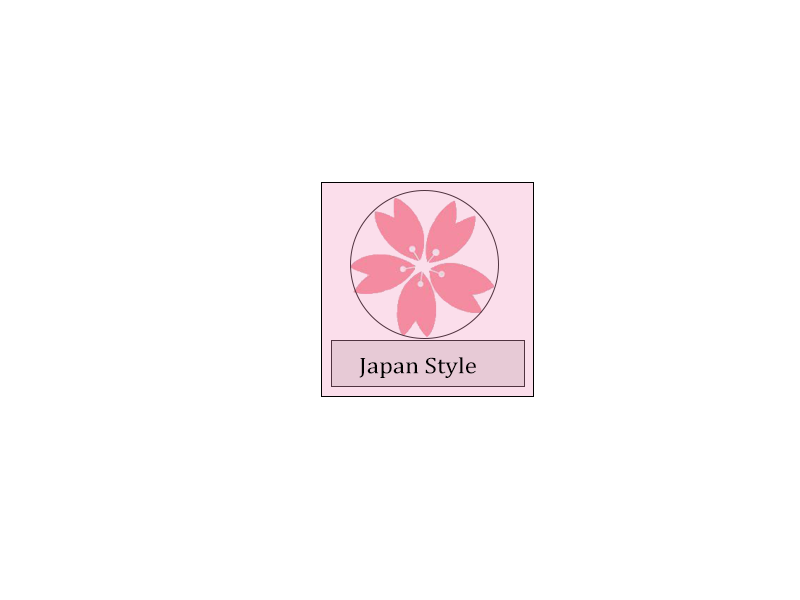
<style>
.page{position:relative;width:800px;height:600px;background:#ffffff}
.page>*{position:absolute;margin:0}
.t1{font:23px "CambriaMath";color:#000000;scale:1.09 1}
</style>
<div class="page">
<p class="t1" style="left:359px;top:357px;width:117px;height:21px">Japan Style</p>
</div>
